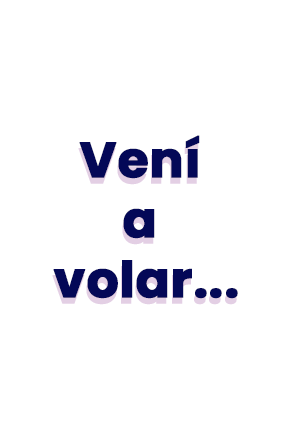
<style>
.page{position:relative;width:296px;height:436px;background:#ffffff}
.page>*{position:absolute;margin:0}
.t1{font:50px "Poppins-Bold";color:#040857;font-weight:bold}
</style>
<div class="page">
<p class="t1" style="left:53px;top:135px;width:185px;height:164px;text-align:center">Vení <br>a <br>volar...</p>
</div>
